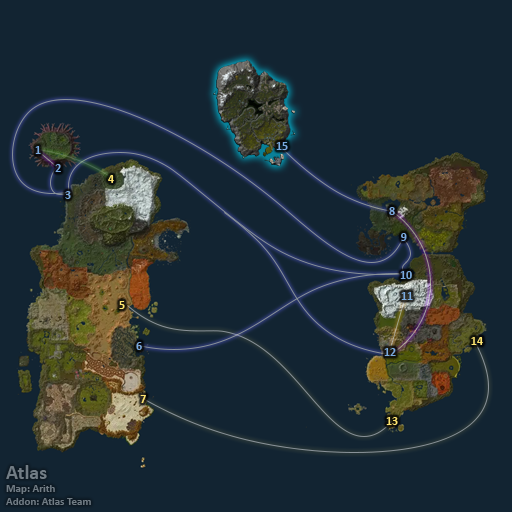
<style>
.page{position:relative;width:512px;height:512px;background:#122432}
.page>*{position:absolute;margin:0}
.t1{font:12px "Calibri-Bold";color:#7babe0}
.t2{font:12px "Calibri-Bold";color:#fee570}
</style>
<div class="page">
<p class="t1" style="left:35px;top:146px;width:6px;height:8px">1</p>
<p class="t1" style="left:276px;top:142px;width:12px;height:8px">15</p>
<p class="t1" style="left:55px;top:164px;width:6px;height:8px">2</p>
<p class="t2" style="left:108px;top:175px;width:6px;height:8px">4</p>
<p class="t1" style="left:65px;top:191px;width:6px;height:8px">3</p>
<p class="t1" style="left:389px;top:207px;width:6px;height:8px">8</p>
<p class="t1" style="left:401px;top:233px;width:6px;height:8px">9</p>
<p class="t1" style="left:400px;top:271px;width:12px;height:8px">10</p>
<p class="t1" style="left:401px;top:292px;width:12px;height:8px">11</p>
<p class="t2" style="left:119px;top:301px;width:6px;height:8px">5</p>
<p class="t1" style="left:136px;top:342px;width:6px;height:8px">6</p>
<p class="t2" style="left:471px;top:337px;width:12px;height:8px">14</p>
<p class="t1" style="left:384px;top:348px;width:12px;height:8px">12</p>
<p class="t2" style="left:140px;top:395px;width:6px;height:8px">7</p>
<p class="t2" style="left:386px;top:417px;width:12px;height:8px">13</p>
</div>
